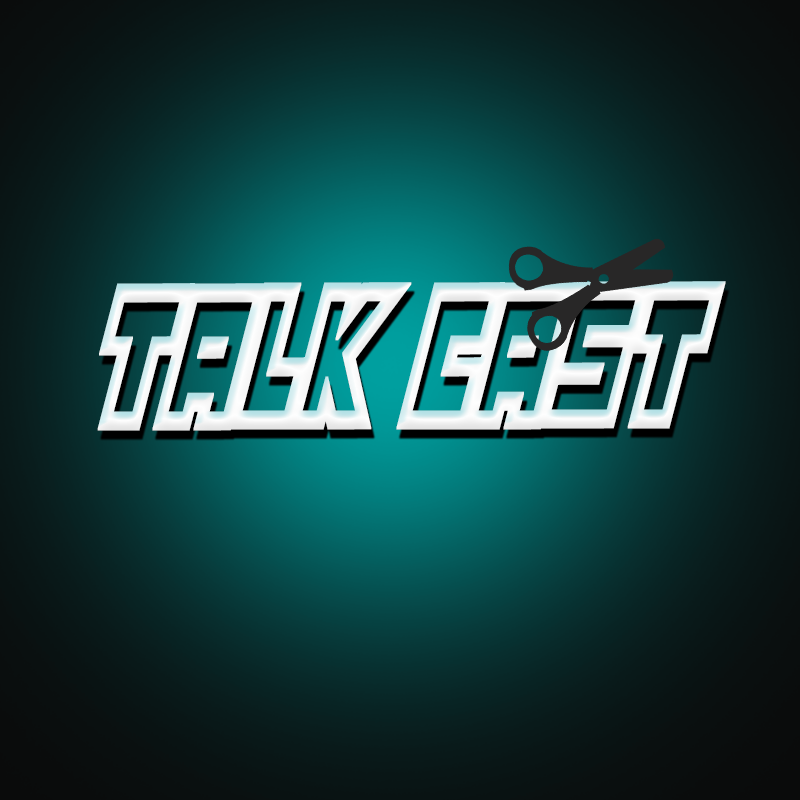
<style>
.page{position:relative;width:800px;height:800px}
.page>*{position:absolute;margin:0}
.t1{font:150.3px "FullPack2025";color:#fefefe;font-weight:bold;scale:0.49 1}
</style>
<div class="page">
<p class="t1" style="left:97px;top:281px;width:629px;height:150px">Talk Cast</p>
</div>
